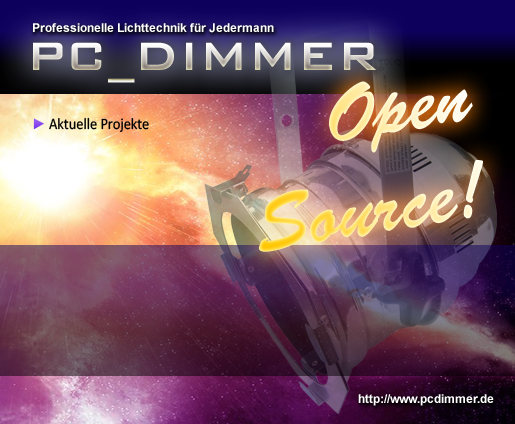
<style>
.page{position:relative;width:515px;height:424px}
.page>*{position:absolute;margin:0}
.t1{font:12px "Arial-BoldMT";color:#ffffff}
.t2{font:52.8px "BankGothicBT-Medium"}
.t3{font:80.4px "BrushScriptStd";scale:0.94 1}
.t4{font:16px "Calibri";color:#000000;scale:0.9 1}
</style>
<div class="page">
<p class="t1" style="left:33px;top:23px;width:241px;height:10px">Professionelle Lichttechnik für Jedermann</p>
<p class="t2" style="left:33px;top:42px;width:344px;height:41px">PC_DIMMER</p>
<p class="t3" style="left:259px;top:81px;width:224px;height:171px;text-align:right;rotate:-9deg">Open<br>Source!</p>
<p class="t4" style="left:49px;top:117px;width:100px;height:15px">Aktuelle Projekte</p>
<p class="t1" style="left:358px;top:394px;width:136px;height:12px">http://www.pcdimmer.de</p>
</div>
